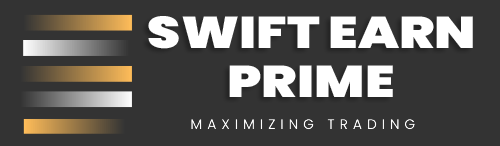
<style>
.page{position:relative;width:500px;height:146px;background:#333333}
.page>*{position:absolute;margin:0}
.t1{font:44.5px "Poppins-Black";color:#ffffff;text-transform:uppercase;scale:1.19 1}
</style>
<div class="page">
<p class="t1" style="left:148px;top:16px;width:325px;height:33px">Swift Earn</p>
<p class="t1" style="left:229px;top:65px;width:164px;height:32px">prime</p>
</div>
